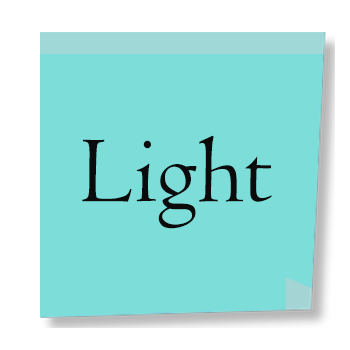
<style>
.page{position:relative;width:350px;height:350px;background:#7cddd9}
.page>*{position:absolute;margin:0}
.t1{font:97.6px "Centaur";color:#0b0b0b}
</style>
<div class="page">
<p class="t1" style="left:82px;top:135px;width:190px;height:94px">Light</p>
</div>
